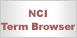
<style>
.page{position:relative;width:77px;height:38px;background:#ffffff}
.page>*{position:absolute;margin:0}
.t1{font:10px/13px "Arial-Black";letter-spacing:-0.023em;color:#a45d5b}
</style>
<div class="page">
<p class="t1" style="left:1px;top:9px;width:75px;height:21px;text-align:center">NCI<br>Term Browser</p>
</div>
